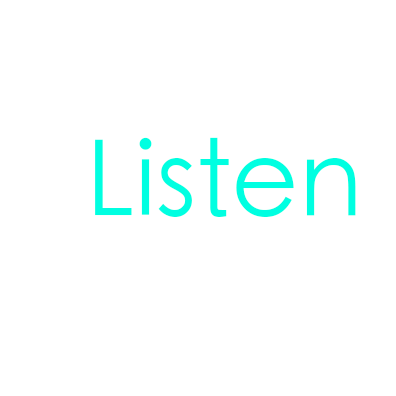
<style>
.page{position:relative;width:396px;height:396px;background:#ffffff}
.page>*{position:absolute;margin:0}
.t1{font:104.4px "STHeiti";color:#00ffe1}
</style>
<div class="page">
<p class="t1" style="left:95px;top:137px;width:261px;height:80px">Listen</p>
</div>
